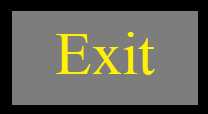
<style>
.page{position:relative;width:208px;height:114px;background:#7d7d7d}
.page>*{position:absolute;margin:0}
.t1{font:60px "TimesNewRomanPSMT";color:#fff200}
</style>
<div class="page">
<p class="t1" style="left:56px;top:32px;width:99px;height:43px">Exit</p>
</div>
